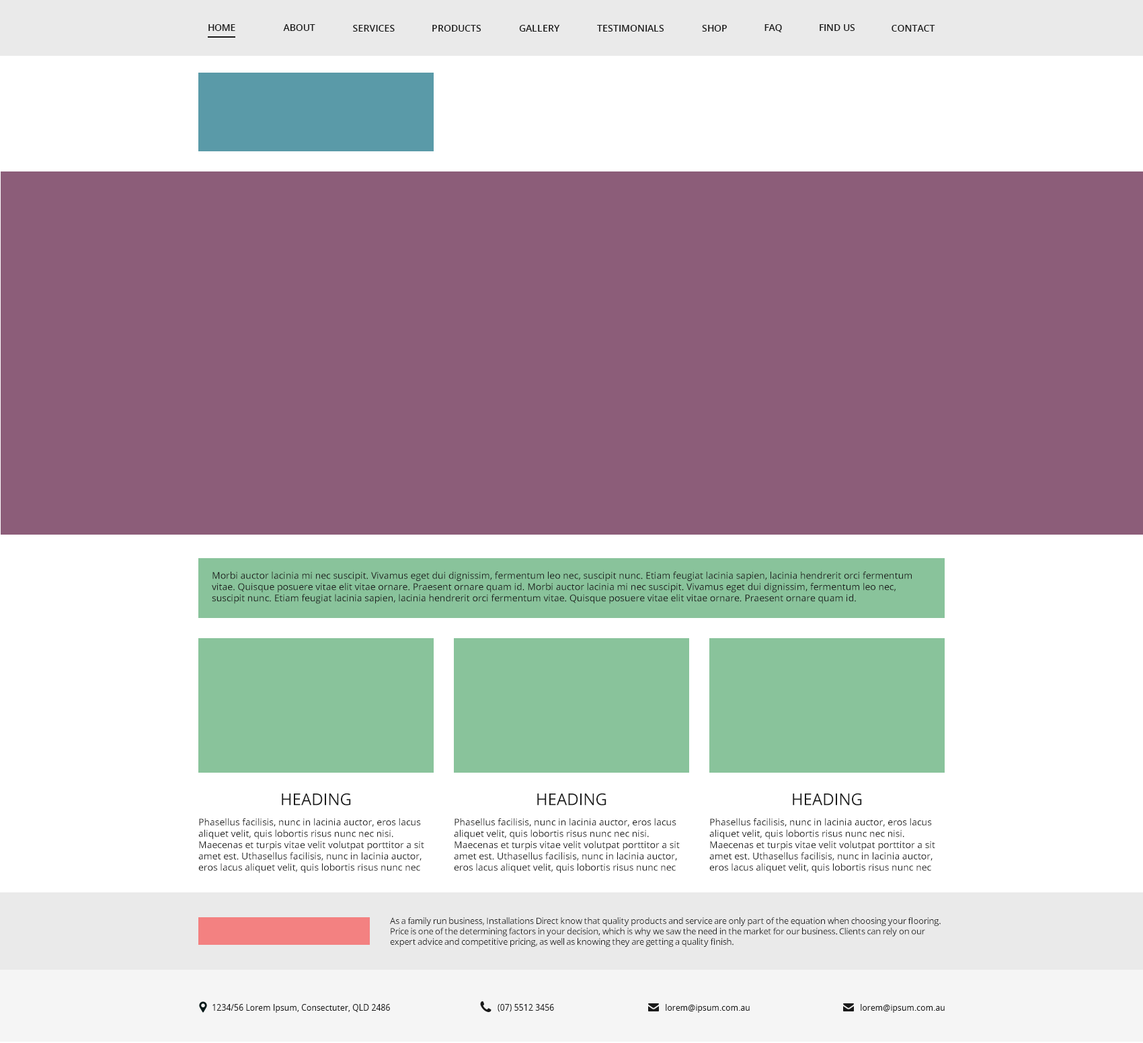
<style>
.page{position:relative;width:1143px;height:1043px;background:#8c5d79}
.page>*{position:absolute;margin:0}
.t1{font:9.4px "OpenSans-Semibold";letter-spacing:-0.015em;color:#1a1a1a;text-transform:uppercase}
.t2{font:9.4px "OpenSans-Semibold";color:#1a1a1a;text-transform:uppercase}
.t3{font:9.4px "OpenSans";color:#1a1a1a}
.t4{font:16.1px "OpenSans";color:#1a1a1a;text-transform:uppercase}
.t5{font:8.7px "OpenSans";letter-spacing:-0.015em;color:#1a1a1a}
.t6{font:8.7px "OpenSans";color:#1a1a1a;scale:0.95 1}
</style>
<div class="page">
<p class="t1" style="left:208px;top:24px;width:27px;height:7px">Home</p>
<p class="t2" style="left:283px;top:24px;width:32px;height:7px">About</p>
<p class="t2" style="left:353px;top:25px;width:42px;height:7px">Services</p>
<p class="t2" style="left:432px;top:25px;width:50px;height:7px">Products</p>
<p class="t2" style="left:519px;top:25px;width:41px;height:7px">Gallery</p>
<p class="t2" style="left:597px;top:25px;width:67px;height:7px">Testimonials</p>
<p class="t2" style="left:702px;top:25px;width:25px;height:7px">Shop</p>
<p class="t2" style="left:765px;top:24px;width:17px;height:8px">FAQ</p>
<p class="t2" style="left:820px;top:24px;width:35px;height:7px">Find Us</p>
<p class="t2" style="left:892px;top:25px;width:43px;height:7px">Contact</p>
<p class="t3" style="left:212px;top:572px;width:700px;height:32px">Morbi auctor lacinia mi nec suscipit. Vivamus eget dui dignissim, fermentum leo nec, suscipit nunc. Etiam feugiat lacinia sapien, lacinia hendrerit orci fermentum vitae. Quisque posuere vitae elit vitae ornare. Praesent ornare quam id. Morbi auctor lacinia mi nec suscipit. Vivamus eget dui dignissim, fermentum leo nec, suscipit nunc. Etiam feugiat lacinia sapien, lacinia hendrerit orci fermentum vitae. Quisque posuere vitae elit vitae ornare. Praesent ornare quam id.</p>
<p class="t4" style="left:282px;top:793px;width:69px;height:13px">Heading</p>
<p class="t4" style="left:537px;top:793px;width:70px;height:13px">Heading</p>
<p class="t4" style="left:793px;top:793px;width:69px;height:13px">Heading</p>
<p class="t3" style="left:198px;top:818px;width:226px;height:55px">Phasellus facilisis, nunc in lacinia auctor, eros lacus aliquet velit, quis lobortis risus nunc nec nisi. Maecenas et turpis vitae velit volutpat porttitor a sit amet est. Uthasellus facilisis, nunc in lacinia auctor, eros lacus aliquet velit, quis lobortis risus nunc nec nisi.</p>
<p class="t3" style="left:454px;top:818px;width:226px;height:55px">Phasellus facilisis, nunc in lacinia auctor, eros lacus aliquet velit, quis lobortis risus nunc nec nisi. Maecenas et turpis vitae velit volutpat porttitor a sit amet est. Uthasellus facilisis, nunc in lacinia auctor, eros lacus aliquet velit, quis lobortis risus nunc nec nisi.</p>
<p class="t3" style="left:709px;top:818px;width:226px;height:55px">Phasellus facilisis, nunc in lacinia auctor, eros lacus aliquet velit, quis lobortis risus nunc nec nisi. Maecenas et turpis vitae velit volutpat porttitor a sit amet est. Uthasellus facilisis, nunc in lacinia auctor, eros lacus aliquet velit, quis lobortis risus nunc nec nisi.</p>
<p class="t5" style="left:390px;top:917px;width:551px;height:30px">As a family run business, Installations Direct know that quality products and service are only part of the equation when choosing your flooring. Price is one of the determining factors in your decision, which is why we saw the need in the market for our business. Clients can rely on our expert advice and competitive pricing, as well as knowing they are getting a quality finish.</p>
<p class="t6" style="left:213px;top:1004px;width:177px;height:9px">1234/56 Lorem Ipsum, Consectuter, QLD 2486</p>
<p class="t6" style="left:498px;top:1004px;width:56px;height:8px">(07) 5512 3456</p>
<p class="t6" style="left:666px;top:1004px;width:84px;height:9px">lorem@ipsum.com.au</p>
<p class="t6" style="left:861px;top:1004px;width:84px;height:9px">lorem@ipsum.com.au</p>
</div>
